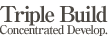
<style>
.page{position:relative;width:108px;height:39px;background:#ffffff}
.page>*{position:absolute;margin:0}
.t1{font:12px/12px "RyuminPro-ExBold";letter-spacing:-0.08em;color:#4c4843}
.t2{font:22px/20px "RyuminPro-ExBold";letter-spacing:-0.08em;color:#4c4843}
</style>
<div class="page">
<p class="t1" style="left:0px;top:5px;width:108px;height:31px"><span class="t2">Triple Build<br></span>Concentrated Develop.</p>
</div>
